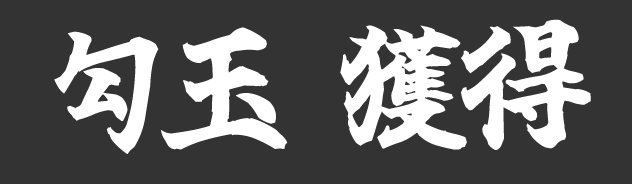
<style>
.page{position:relative;width:632px;height:184px;background:#333333}
.page>*{position:absolute;margin:0}
.t1{font:120px "Tamanegi-Kaisho-Geki-FreeVer-7";color:#ffffff}
</style>
<div class="page">
<p class="t1" style="left:54px;top:19px;width:537px;height:135px">勾玉 獲得</p>
</div>
